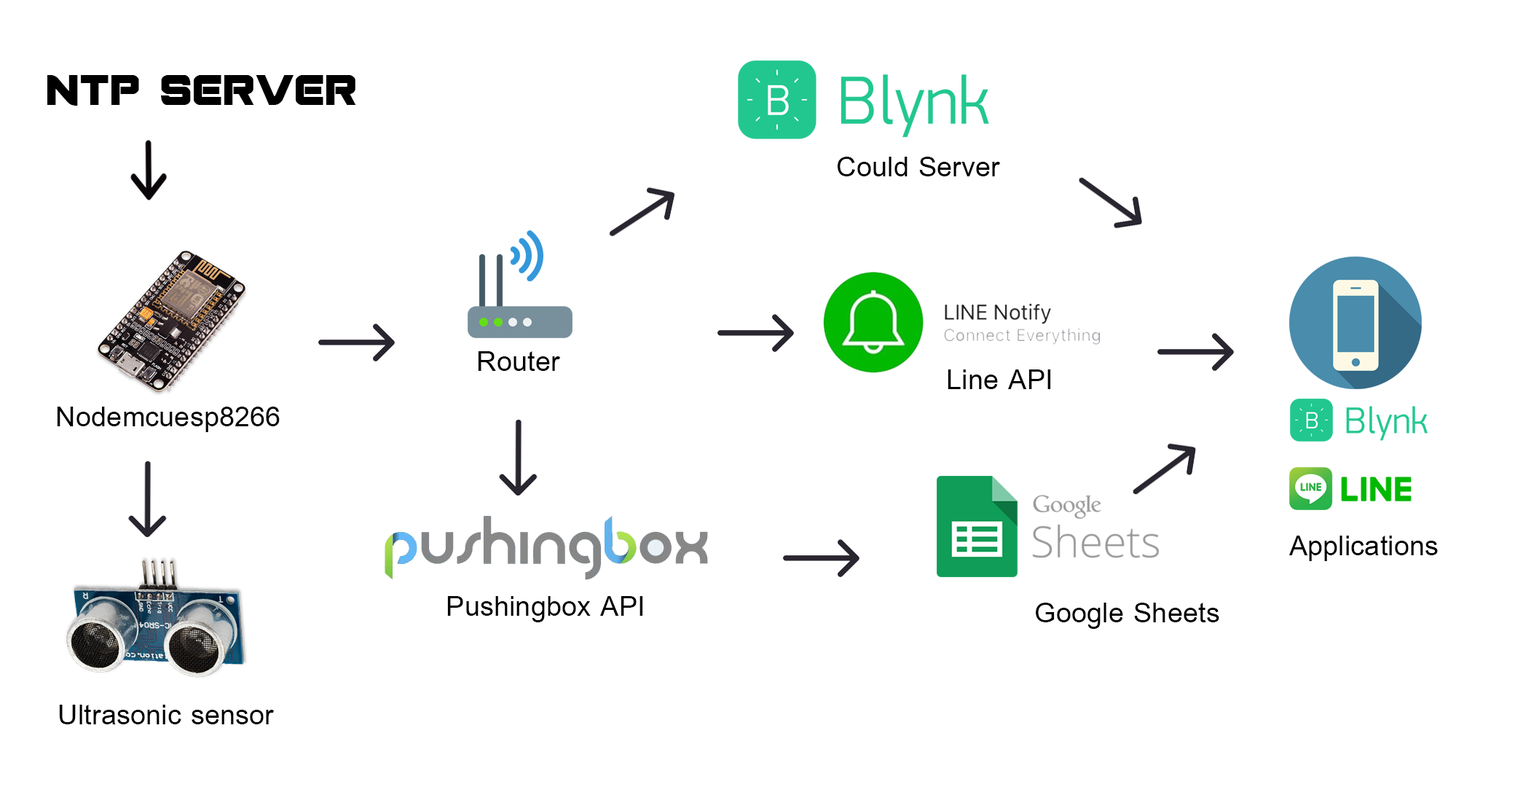
<style>
.page{position:relative;width:1515px;height:787px;background:#ffffff}
.page>*{position:absolute;margin:0}
.t1{font:42.5px "PraetorianBold";color:#000000}
.t2{font:42.5px "BrowalliaNew";color:#000000}
</style>
<div class="page">
<p class="t1" style="left:47px;top:75px;width:309px;height:31px">NTP SERVER</p>
<p class="t2" style="left:837px;top:157px;width:164px;height:19px">Could Server</p>
<p class="t2" style="left:478px;top:351px;width:83px;height:20px">Router</p>
<p class="t2" style="left:948px;top:369px;width:103px;height:20px">Line API</p>
<p class="t2" style="left:57px;top:407px;width:223px;height:25px">Nodemcuesp8266</p>
<p class="t2" style="left:1290px;top:536px;width:148px;height:25px">Applications</p>
<p class="t2" style="left:447px;top:596px;width:196px;height:26px">Pushingbox API</p>
<p class="t2" style="left:1036px;top:603px;width:184px;height:26px">Google Sheets</p>
<p class="t2" style="left:59px;top:705px;width:216px;height:19px">Ultrasonic sensor</p>
</div>
